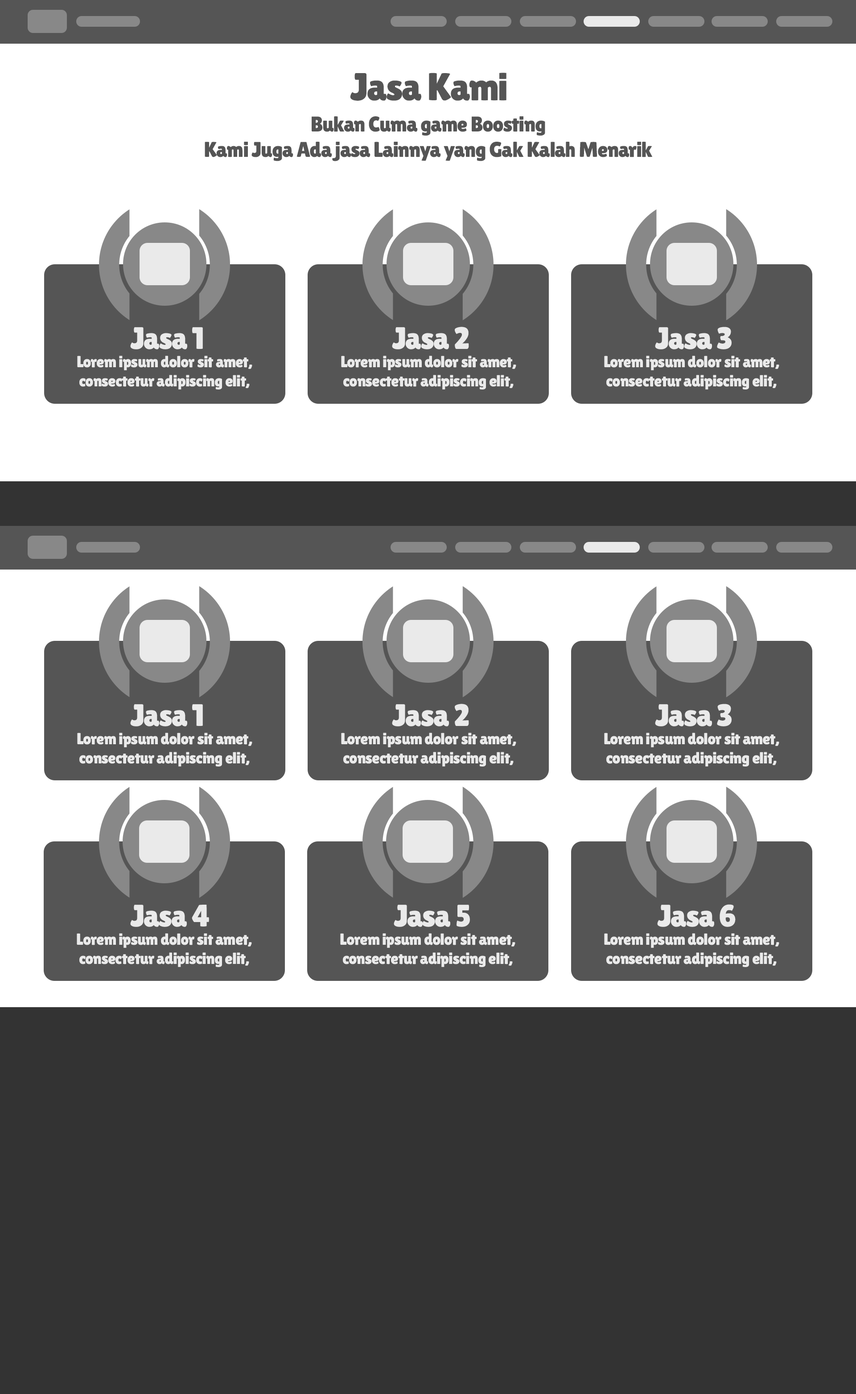
<style>
.page{position:relative;width:856px;height:1394px;background:#ffffff}
.page>*{position:absolute;margin:0}
.t1{font:38.8px "LilitaOne";letter-spacing:-0.025em;color:#555555}
.t2{font:21.4px "LilitaOne";letter-spacing:-0.025em;color:#555555}
.t3{font:31px "LilitaOne";letter-spacing:-0.025em;color:#eaeaea}
.t4{font:16px "LilitaOne";letter-spacing:-0.025em;color:#eaeaea}
</style>
<div class="page">
<p class="t1" style="left:350px;top:73px;width:156px;height:28px">Jasa Kami</p>
<p class="t2" style="left:205px;top:116px;width:447px;height:45px;text-align:center">Bukan Cuma game Boosting<br>Kami Juga Ada jasa Lainnya yang Gak Kalah Menarik</p>
<p class="t3" style="left:130px;top:327px;width:73px;height:22px">Jasa 1</p>
<p class="t3" style="left:392px;top:327px;width:77px;height:22px">Jasa 2</p>
<p class="t3" style="left:655px;top:327px;width:76px;height:22px">Jasa 3</p>
<p class="t4" style="left:77px;top:356px;width:175px;height:33px;text-align:center">Lorem ipsum dolor sit amet,<br>consectetur adipiscing elit,</p>
<p class="t4" style="left:341px;top:356px;width:175px;height:33px;text-align:center">Lorem ipsum dolor sit amet,<br>consectetur adipiscing elit,</p>
<p class="t4" style="left:604px;top:356px;width:175px;height:33px;text-align:center">Lorem ipsum dolor sit amet,<br>consectetur adipiscing elit,</p>
<p class="t3" style="left:130px;top:704px;width:73px;height:22px">Jasa 1</p>
<p class="t3" style="left:392px;top:704px;width:77px;height:22px">Jasa 2</p>
<p class="t3" style="left:655px;top:704px;width:76px;height:22px">Jasa 3</p>
<p class="t4" style="left:77px;top:733px;width:175px;height:33px;text-align:center">Lorem ipsum dolor sit amet,<br>consectetur adipiscing elit,</p>
<p class="t4" style="left:341px;top:733px;width:175px;height:33px;text-align:center">Lorem ipsum dolor sit amet,<br>consectetur adipiscing elit,</p>
<p class="t4" style="left:604px;top:733px;width:175px;height:33px;text-align:center">Lorem ipsum dolor sit amet,<br>consectetur adipiscing elit,</p>
<p class="t3" style="left:130px;top:905px;width:79px;height:22px">Jasa 4</p>
<p class="t3" style="left:393px;top:905px;width:77px;height:22px">Jasa 5</p>
<p class="t3" style="left:657px;top:904px;width:78px;height:23px">Jasa 6</p>
<p class="t4" style="left:77px;top:933px;width:175px;height:34px;text-align:center">Lorem ipsum dolor sit amet,<br>consectetur adipiscing elit,</p>
<p class="t4" style="left:340px;top:933px;width:175px;height:34px;text-align:center">Lorem ipsum dolor sit amet,<br>consectetur adipiscing elit,</p>
<p class="t4" style="left:604px;top:933px;width:175px;height:34px;text-align:center">Lorem ipsum dolor sit amet,<br>consectetur adipiscing elit,</p>
</div>
